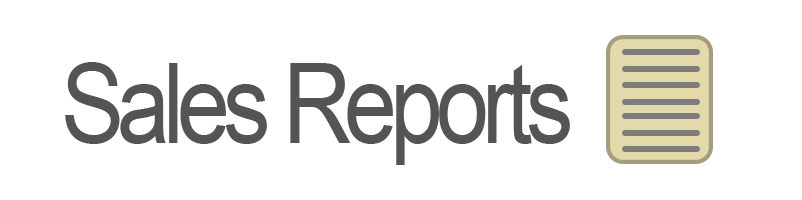
<style>
.page{position:relative;width:802px;height:200px;background:#ffffff}
.page>*{position:absolute;margin:0}
.t1{font:112px "ArialMT";letter-spacing:-0.075em;color:#545454;scale:0.85 1}
</style>
<div class="page">
<p class="t1" style="left:65px;top:62px;width:505px;height:103px">Sales Reports</p>
</div>
